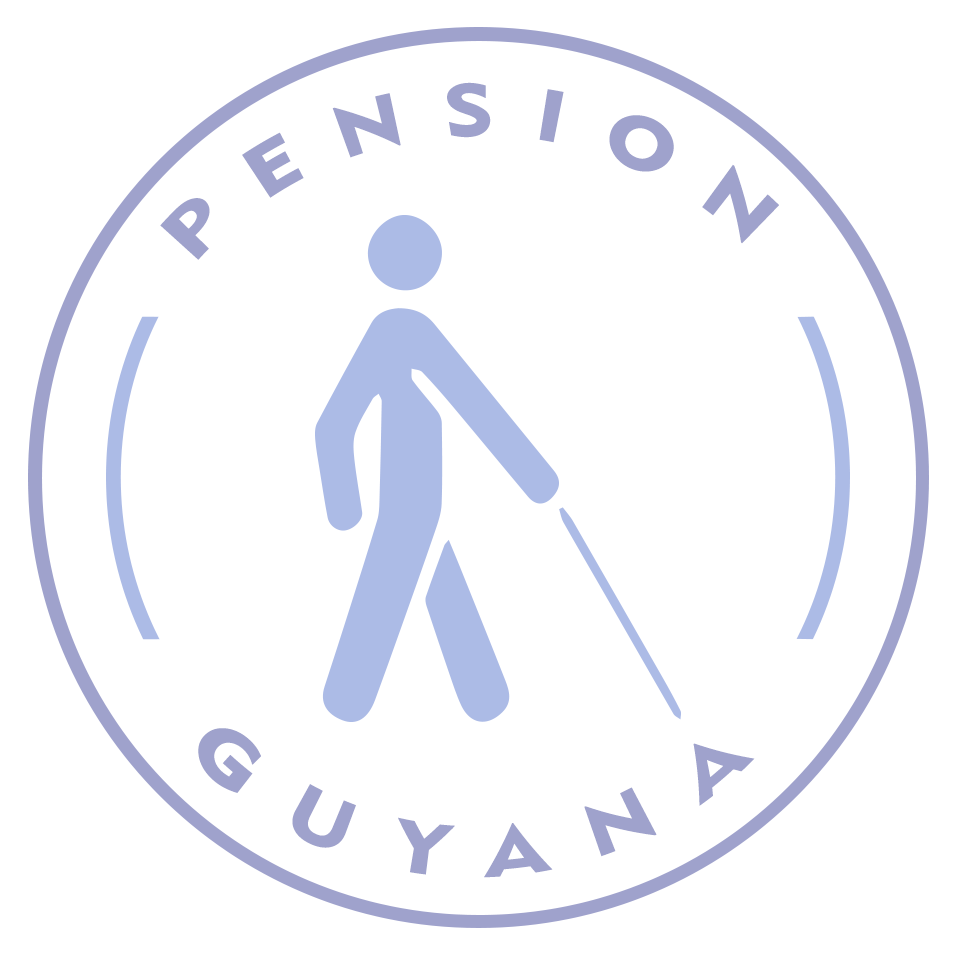
<style>
.page{position:relative;width:966px;height:955px;background:#ffffff}
.page>*{position:absolute;margin:0}
.t1{font:72px "Geometric415BT-BlackA";letter-spacing:0.48em;color:#9fa2cc}
</style>
<div class="page">
<p class="t1" style="left:160px;top:82px;width:619px;height:178px;rotate:1deg">PENSION</p>
<p class="t1" style="left:198px;top:728px;width:557px;height:150px;rotate:-2deg">GUYANA</p>
</div>
